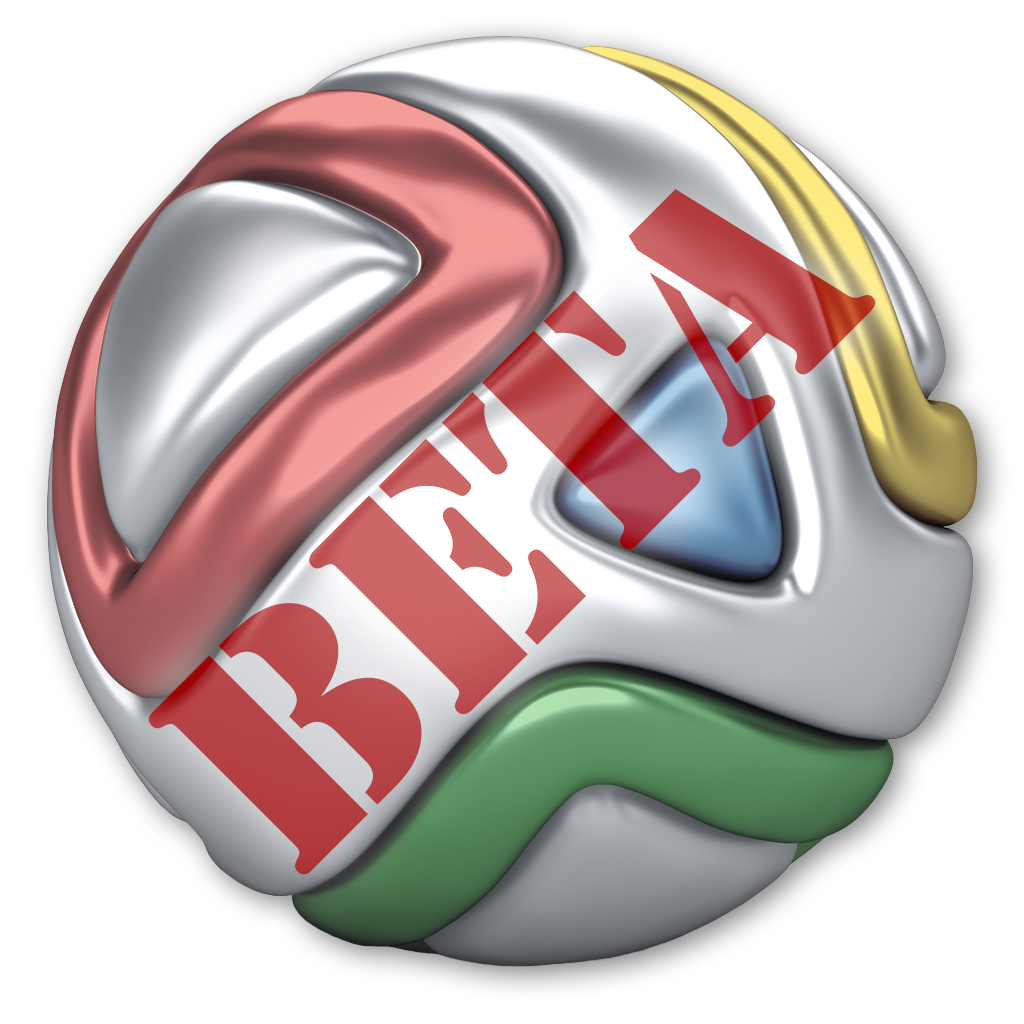
<style>
.page{position:relative;width:1024px;height:1024px;background:#ffffff}
.page>*{position:absolute;margin:0}
.t1{font:300px "StencilStd"}
</style>
<div class="page">
<p class="t1" style="left:148px;top:189px;width:728px;height:686px;rotate:-45deg">BETA</p>
</div>
